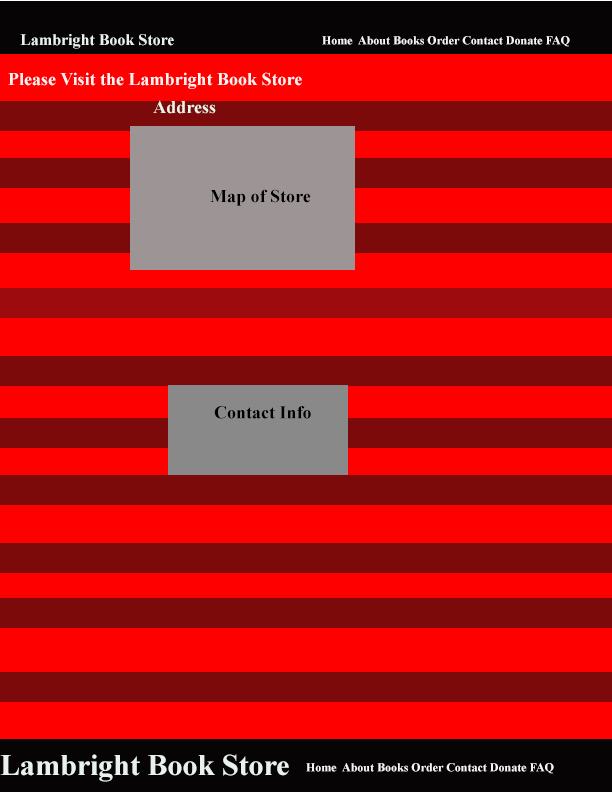
<style>
.page{position:relative;width:612px;height:792px;background:#ff0000}
.page>*{position:absolute;margin:0}
.t1{font:16px "TimesNewRomanPS-BoldMT";color:#e9f1f0}
.t2{font:12px "TimesNewRomanPS-BoldMT";color:#f7f4f4}
.t3{font:18px "TimesNewRomanPS-BoldMT";color:#f7f4f4}
.t4{font:18px "TimesNewRomanPS-BoldMT";color:#e9f4e9}
.t5{font:18px "TimesNewRomanPS-BoldMT";color:#000000}
.t6{font:30px "TimesNewRomanPS-BoldMT";color:#e9f1f0}
</style>
<div class="page">
<p class="t1" style="left:20px;top:34px;width:154px;height:15px">Lambright Book Store</p>
<p class="t2" style="left:322px;top:36px;width:248px;height:11px">Home  About Books Order Contact Donate FAQ</p>
<p class="t3" style="left:8px;top:72px;width:294px;height:17px">Please Visit the Lambright Book Store</p>
<p class="t4" style="left:153px;top:100px;width:63px;height:14px">Address</p>
<p class="t5" style="left:210px;top:189px;width:101px;height:17px">Map of Store</p>
<p class="t5" style="left:214px;top:406px;width:97px;height:13px">Contact Info</p>
<p class="t6" style="left:0px;top:754px;width:289px;height:28px">Lambright Book Store</p>
<p class="t2" style="left:306px;top:763px;width:248px;height:11px">Home  About Books Order Contact Donate FAQ</p>
</div>
